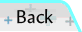
<style>
.page{position:relative;width:82px;height:32px;background:#eeeeee}
.page>*{position:absolute;margin:0}
.t1{font:18.7px "Amira-Roman";color:#000000}
</style>
<div class="page">
<p class="t1" style="left:17px;top:9px;width:36px;height:15px;opacity:0.96">Back</p>
</div>
